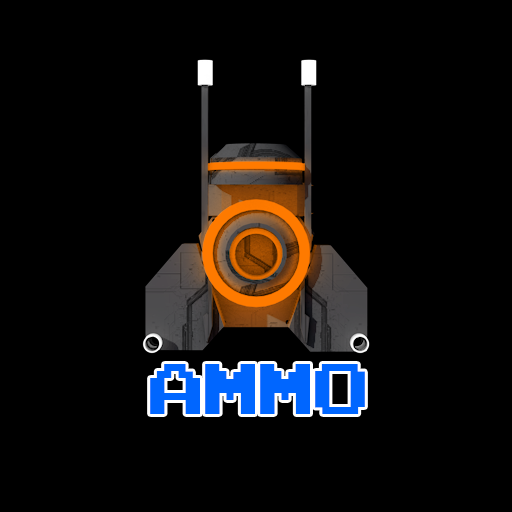
<style>
.page{position:relative;width:512px;height:512px;background:#000000}
.page>*{position:absolute;margin:0}
.t1{font:100px "ArcadeClassic";color:#0066ff}
</style>
<div class="page">
<p class="t1" style="left:150px;top:364px;width:215px;height:50px">Ammo</p>
</div>
